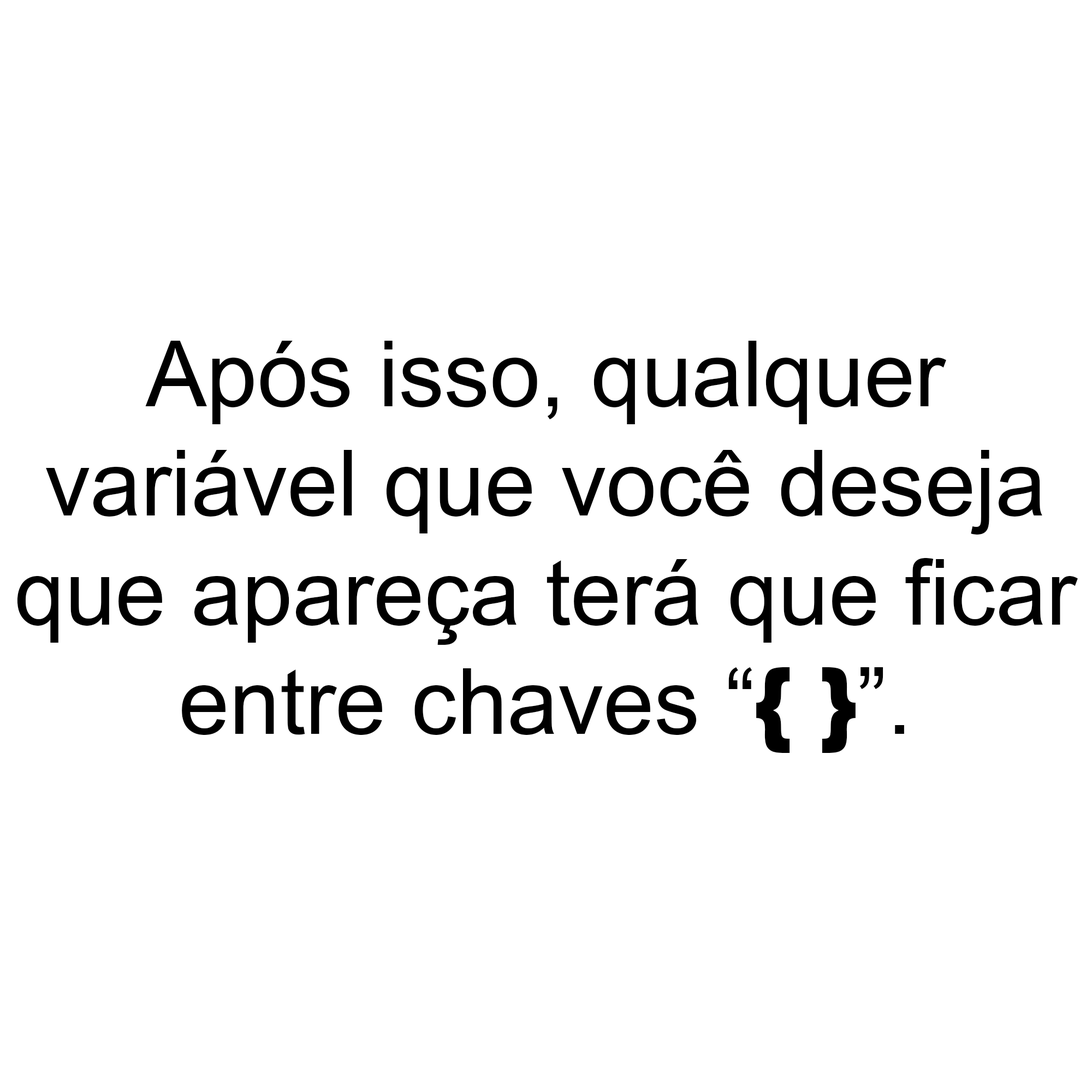
<style>
.page{position:relative;width:1092px;height:1092px;background:#ffffff}
.page>*{position:absolute;margin:0}
.t1{font:91px "ArialMT";color:#000000}
.t2{font:91px "Arial-Black";color:#000000}
</style>
<div class="page">
<p class="t1" style="left:17px;top:341px;width:1061px;height:412px;text-align:center">Após isso, qualquer<br>variável que você deseja<br>que apareça terá que ficar<br>entre chaves “<span class="t2">{ }</span>”.</p>
</div>
